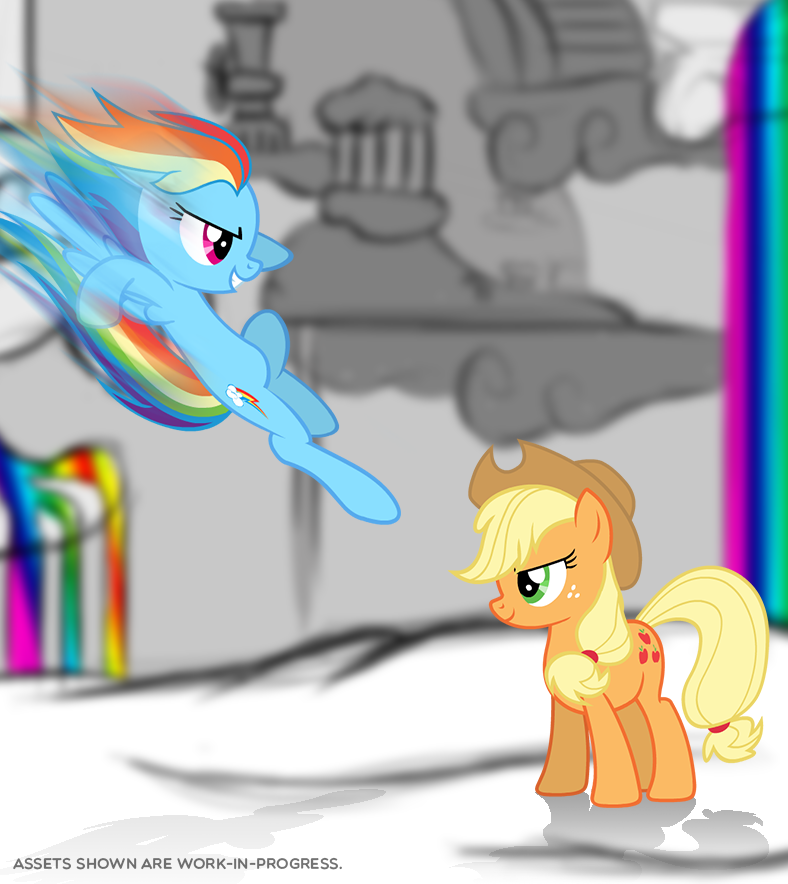
<style>
.page{position:relative;width:788px;height:884px}
.page>*{position:absolute;margin:0}
.t1{font:15.2px "Multicolore";color:#6f6f6f}
</style>
<div class="page">
<p class="t1" style="left:13px;top:857px;width:329px;height:13px">Assets shown are Work-In-Progress.</p>
</div>
